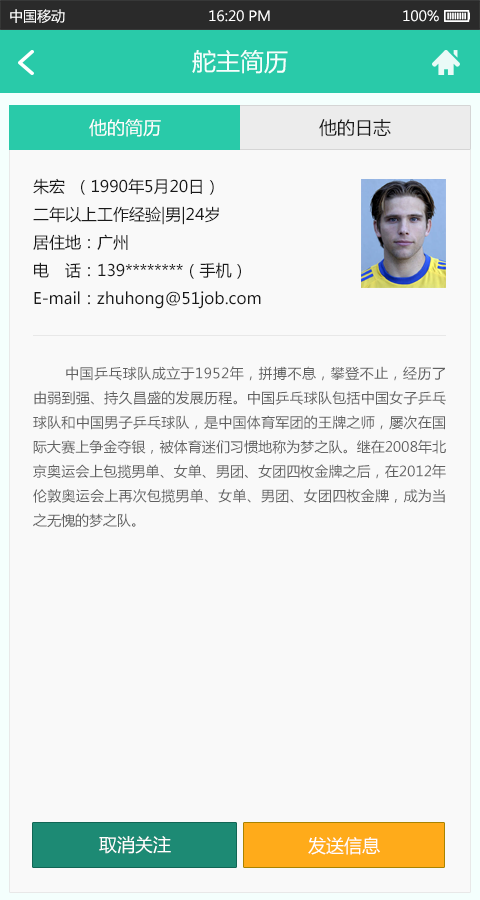
<style>
.page{position:relative;width:480px;height:900px;background:#f9f9f9}
.page>*{position:absolute;margin:0}
.t1{font:14px "MicrosoftYaHei";color:#ffffff}
.t2{font:24px "MicrosoftYaHei";color:#f4fffd}
.t3{font:18px "MicrosoftYaHei";color:#ffffff}
.t4{font:18px "MicrosoftYaHei";color:#191919}
.t5{font:16px "MicrosoftYaHei";color:#191919}
.t6{font:14px "MicrosoftYaHei";color:#626262}
</style>
<div class="page">
<p class="t1" style="left:10px;top:9px;width:55px;height:14px">中国移动</p>
<p class="t1" style="left:209px;top:10px;width:61px;height:12px">16:20 PM</p>
<p class="t1" style="left:403px;top:10px;width:36px;height:12px">100%</p>
<p class="t2" style="left:192px;top:50px;width:96px;height:24px">舵主简历</p>
<p class="t3" style="left:89px;top:119px;width:72px;height:18px">他的简历</p>
<p class="t4" style="left:319px;top:119px;width:72px;height:18px">他的日志</p>
<p class="t5" style="left:33px;top:178px;width:228px;height:131px">朱宏  （1990年5月20日）<br>二年以上工作经验|男|24岁<br>居住地：广州<br>电　话：139********（手机）<br>E-mail：zhuhong@51job.com</p>
<p class="t6" style="left:33px;top:366px;width:413px;height:162px;text-align:justify">中国乒乓球队成立于1952年，拼搏不息，攀登不止，经历了由弱到强、持久昌盛的发展历程。中国乒乓球队包括中国女子乒乓球队和中国男子乒乓球队，是中国体育军团的王牌之师，屡次在国际大赛上争金夺银，被体育迷们习惯地称为梦之队。继在2008年北京奥运会上包揽男单、女单、男团、女团四枚金牌之后，在2012年伦敦奥运会上再次包揽男单、女单、男团、女团四枚金牌，成为当之无愧的梦之队。</p>
<p class="t3" style="left:99px;top:836px;width:72px;height:18px">取消关注</p>
<p class="t3" style="left:308px;top:837px;width:72px;height:18px">发送信息</p>
</div>
